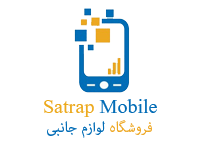
<style>
.page{position:relative;width:200px;height:150px;background:#ffffff}
.page>*{position:absolute;margin:0}
.t1{font:25px "Aparajita";color:#eca91d}
.t2{font:25px "Aparajita";color:#026cb6}
.t3{font:20px "AdobeArabic-Regular";color:#026cb6}
.t4{font:20px "AdobeArabic-Regular";color:#eda723}
</style>
<div class="page">
<p class="t1" style="left:44px;top:99px;width:113px;height:18px">Satrap <span class="t2">Mobile</span></p>
<p class="t3" style="left:47px;top:120px;width:105px;height:18px"><span class="t4">فروشگاه</span> لوازم جانبی</p>
</div>
